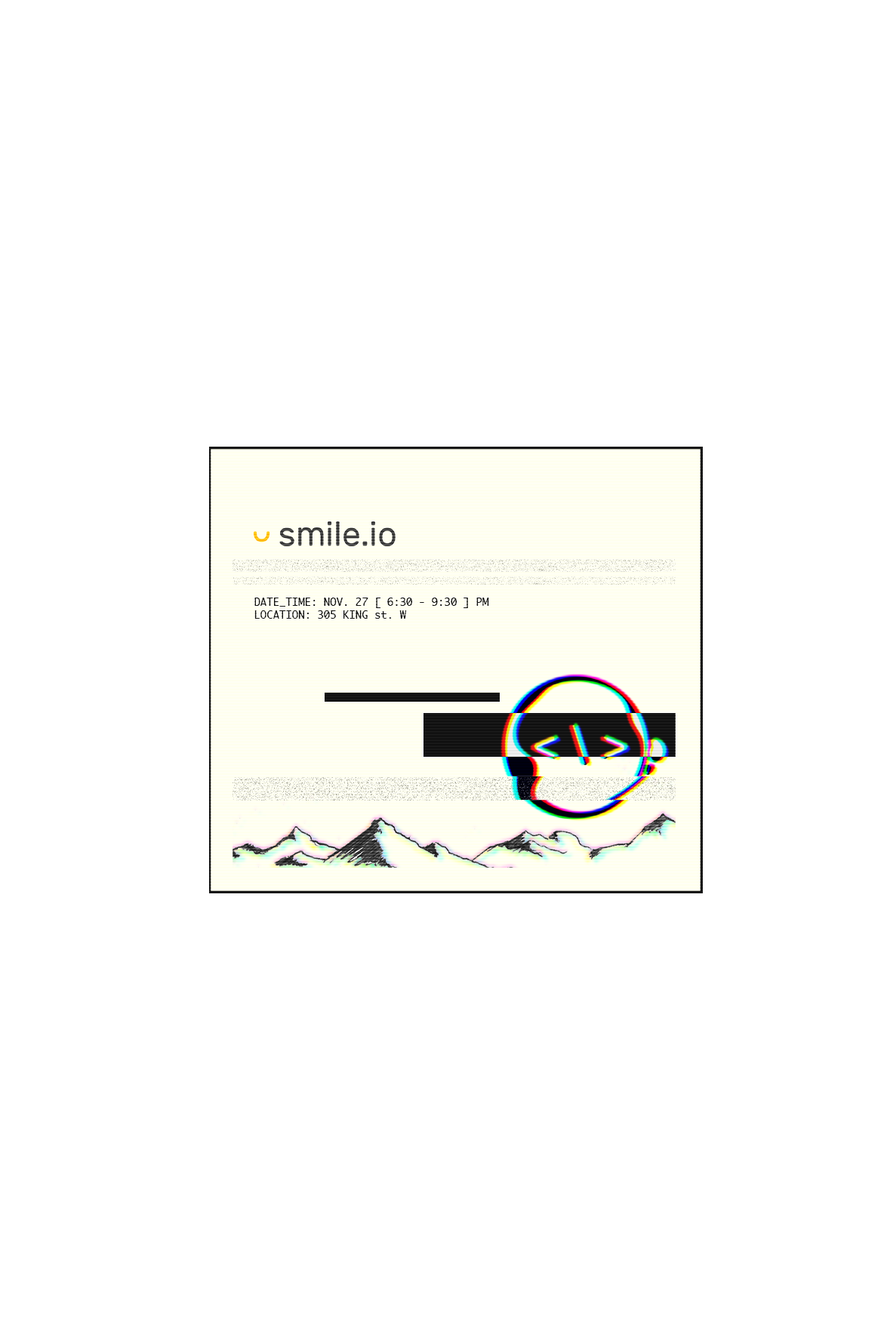
<style>
.page{position:relative;width:890px;height:1340px;background:#ffffff}
.page>*{position:absolute;margin:0}
.t1{font:10.6px "Monaco";color:#141414}
</style>
<div class="page">
<p class="t1" style="left:254px;top:598px;width:235px;height:21px">DATE_TIME: NOV. 27 [ 6:30 - 9:30 ] PM<br>LOCATION: 305 KING st. W</p>
</div>
